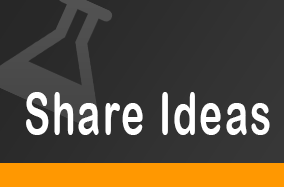
<style>
.page{position:relative;width:284px;height:187px}
.page>*{position:absolute;margin:0}
.t1{font:60px "ArialRoundedMTBold";letter-spacing:0.06em;color:#ffffff;scale:0.65 1}
</style>
<div class="page">
<p class="t1" style="left:26px;top:92px;width:244px;height:43px">Share Ideas</p>
</div>
